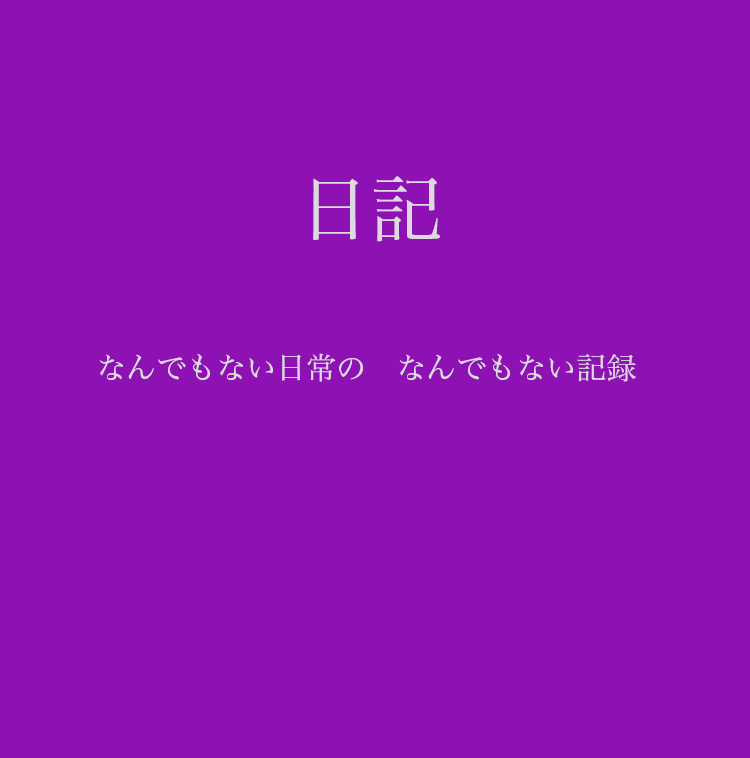
<style>
.page{position:relative;width:750px;height:758px;background:#8e11b3}
.page>*{position:absolute;margin:0}
.t1{font:72px "HiraMinPro-W3";color:#dfd8e1}
.t2{font:30px "HiraMinPro-W3";color:#dfd8e1}
</style>
<div class="page">
<p class="t1" style="left:313px;top:176px;width:127px;height:66px">日記</p>
<p class="t2" style="left:99px;top:353px;width:537px;height:29px">なんでもない日常の　なんでもない記録</p>
</div>
